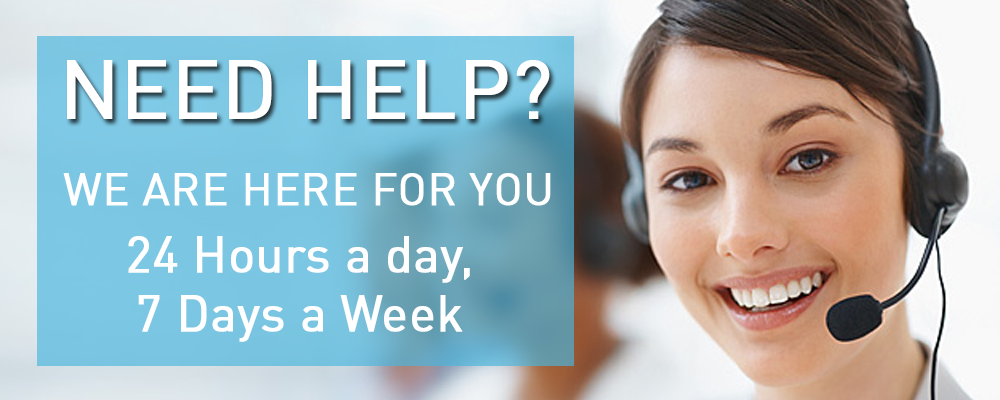
<style>
.page{position:relative;width:1000px;height:400px}
.page>*{position:absolute;margin:0}
.t1{font:81.4px "DINPro-Regular";color:#ffffff;font-weight:bold}
.t2{font:44.8px "DINPro-Regular";color:#ffffff;font-weight:bold}
.t3{font:49.7px "DINPro-Regular";color:#ffffff;font-weight:bold}
</style>
<div class="page">
<p class="t1" style="left:67px;top:60px;width:483px;height:59px">NEED HELP?</p>
<p class="t2" style="left:63px;top:173px;width:488px;height:33px">WE ARE HERE FOR YOU</p>
<p class="t3" style="left:128px;top:236px;width:342px;height:106px;text-align:center">24 Hours a day,<br>7 Days a Week</p>
</div>
